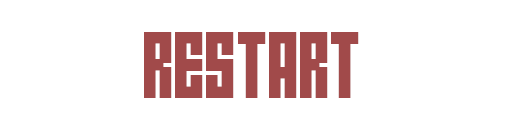
<style>
.page{position:relative;width:512px;height:128px;background:#ffffff}
.page>*{position:absolute;margin:0}
.t1{font:78px "AngiesNewHouse";color:#a14a4a}
</style>
<div class="page">
<p class="t1" style="left:144px;top:32px;width:215px;height:66px">RESTART</p>
</div>
